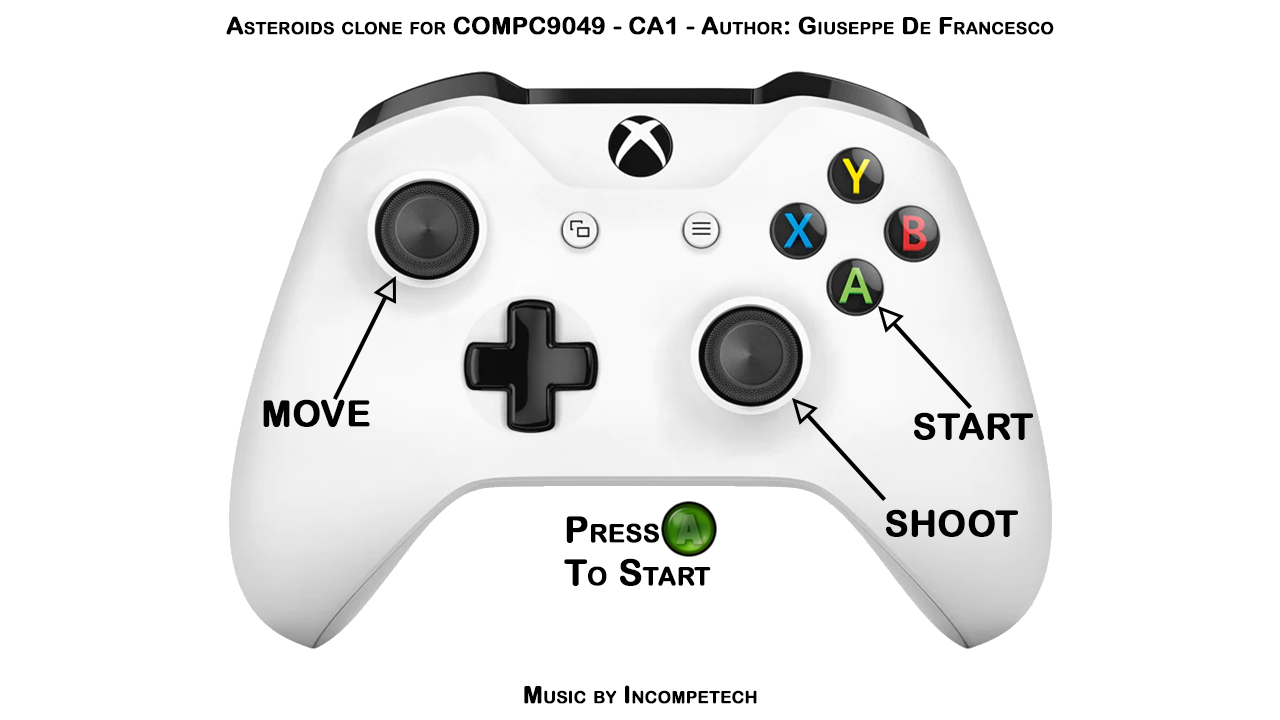
<style>
.page{position:relative;width:1280px;height:720px;background:#ffffff}
.page>*{position:absolute;margin:0}
.t1{font:24px "ArialRoundedMTBold";color:#000000;font-variant:small-caps;font-weight:bold}
.t2{font:36px "ArialRoundedMTBold";color:#000000;font-variant:small-caps;font-weight:bold}
</style>
<div class="page">
<p class="t1" style="left:226px;top:16px;width:828px;height:19px">Asteroids clone for COMPC9049 - CA1 - Author: Giuseppe De Francesco</p>
<p class="t2" style="left:263px;top:399px;width:107px;height:28px">MOVE</p>
<p class="t2" style="left:914px;top:412px;width:119px;height:28px">START</p>
<p class="t2" style="left:886px;top:509px;width:132px;height:28px">SHOOT</p>
<p class="t2" style="left:564px;top:516px;width:147px;height:70px;text-align:center">Press     <br>To Start</p>
<p class="t1" style="left:524px;top:685px;width:233px;height:19px">Music by Incompetech</p>
</div>
